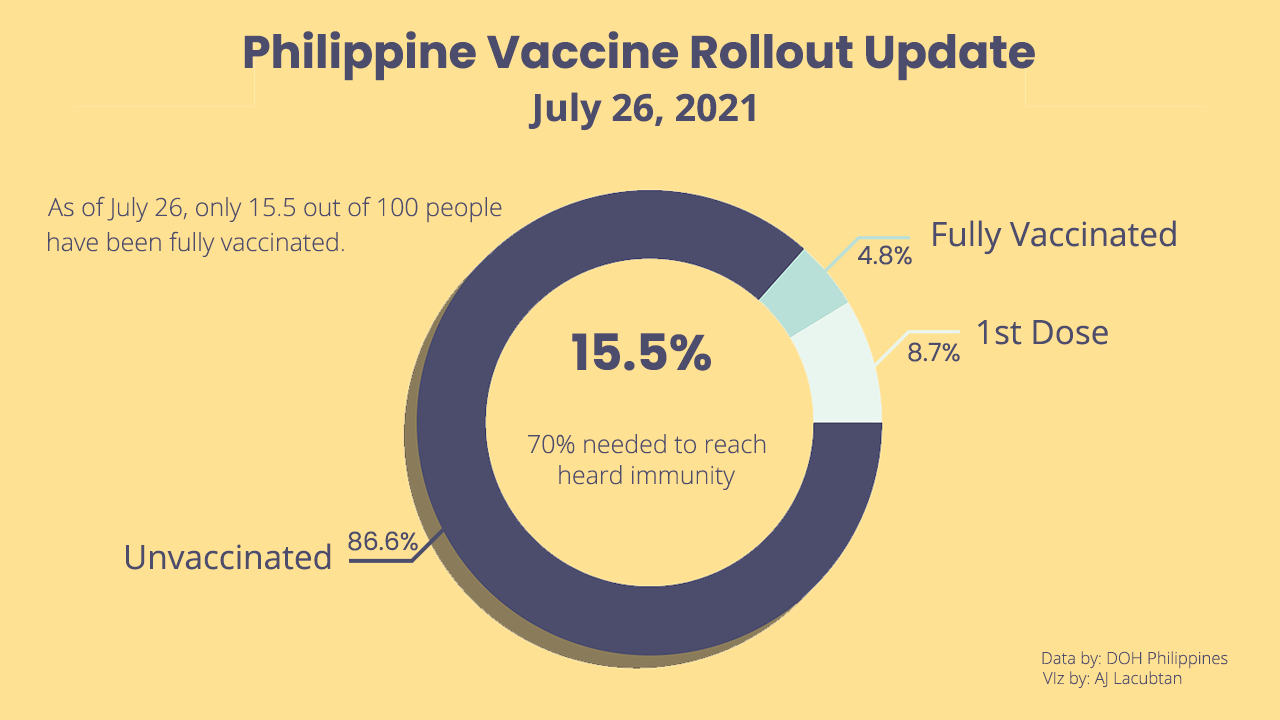
<style>
.page{position:relative;width:1280px;height:720px;background:#ffe194}
.page>*{position:absolute;margin:0}
.t1{font:45.8px "Poppins-Bold";color:#4c4c6d}
.t2{font:37.5px "OpenSans-Bold";color:#4c4c6d}
.t3{font:25px "OpenSans-Light";color:#4c4c6d}
.t4{font:33.3px "OpenSans-Regular";color:#4c4c6d}
.t5{font:25px "Poppins-Regular";color:#4c4c6d}
.t6{font:50px "Poppins-Bold";color:#4c4c6d}
.t7{font:16.7px "OpenSans-Light";color:#4c4c6d}
</style>
<div class="page">
<p class="t1" style="left:244px;top:31px;width:791px;height:50px">Philippine Vaccine Rollout Update</p>
<p class="t2" style="left:528px;top:92px;width:227px;height:39px">July 26, 2021</p>
<p class="t3" style="left:48px;top:196px;width:454px;height:27px">As of July 26, only 15.5 out of 100 people</p>
<p class="t4" style="left:933px;top:220px;width:243px;height:35px">Fully Vaccinated</p>
<p class="t3" style="left:48px;top:231px;width:296px;height:27px">have been fully vaccinated.</p>
<p class="t5" style="left:858px;top:245px;width:54px;height:20px">4.8%</p>
<p class="t4" style="left:978px;top:320px;width:130px;height:25px">1st Dose</p>
<p class="t6" style="left:572px;top:333px;width:139px;height:38px">15.5%</p>
<p class="t5" style="left:908px;top:342px;width:52px;height:20px">8.7%</p>
<p class="t3" style="left:528px;top:434px;width:238px;height:20px">70% needed to reach</p>
<p class="t3" style="left:559px;top:465px;width:176px;height:26px">heard immunity</p>
<p class="t5" style="left:348px;top:531px;width:70px;height:20px">86.6%</p>
<p class="t4" style="left:126px;top:543px;width:205px;height:27px">Unvaccinated</p>
<p class="t7" style="left:1042px;top:651px;width:186px;height:18px">Data by: DOH Philippines</p>
<p class="t7" style="left:1043px;top:671px;width:139px;height:18px">VIz by: AJ Lacubtan</p>
</div>
